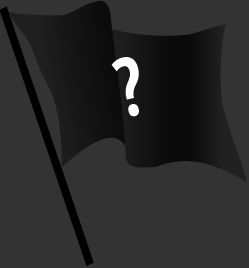
<style>
.page{position:relative;width:249px;height:268px;background:#333333}
.page>*{position:absolute;margin:0}
.t1{font:82.6px "PTSans-NarrowBold";color:#ffffff;scale:0.87 1}
</style>
<div class="page">
<p class="t1" style="left:111px;top:57px;width:28px;height:60px;rotate:-14deg">?</p>
</div>
